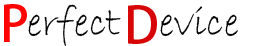
<style>
.page{position:relative;width:256px;height:46px;background:#ffffff}
.page>*{position:absolute;margin:0}
.t1{font:12px "AdobeHeitiStd-Regular";color:#ff0404}
.t2{font:41.7px "BradleyHandITC";color:#000000}
.t3{font:50px "AdobeHeitiStd-Regular";color:#d80707}
.t4{font:41.7px "BradleyHandITC";color:#010101}
</style>
<div class="page">
<p class="t1" style="left:4px;top:4px;width:23px;height:38px">P</p>
<p class="t2" style="left:28px;top:4px;width:93px;height:42px">erfect</p>
<p class="t3" style="left:128px;top:5px;width:29px;height:39px">D</p>
<p class="t4" style="left:160px;top:6px;width:78px;height:31px">evice</p>
</div>
